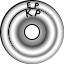
<style>
.page{position:relative;width:64px;height:64px;background:#ffffff}
.page>*{position:absolute;margin:0}
.t1{font:8px "GillSansStd";letter-spacing:-0.028em;color:#000000;scale:1.03 1}
.t2{font:10px "GillSansStd";letter-spacing:-0.028em;color:#000000;scale:1.03 1}
</style>
<div class="page">
<p class="t1" style="left:26px;top:2px;width:13px;height:7px">E  P</p>
<p class="t2" style="left:25px;top:9px;width:16px;height:8px">K P</p>
</div>
